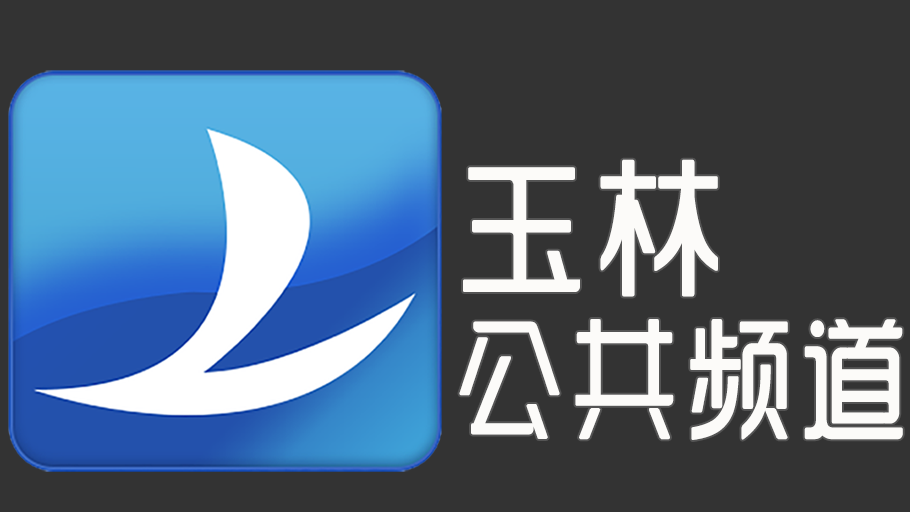
<style>
.page{position:relative;width:910px;height:512px;background:#333333}
.page>*{position:absolute;margin:0}
.t1{font:132px/160px "SJyunlvyuan";letter-spacing:0.02em;color:#fcfbf9;scale:0.85 1}
.t2{font:150px/160px "SJyunlvyuan";letter-spacing:0.02em;color:#fcfbf9;scale:0.9 1}
</style>
<div class="page">
<p class="t1" style="left:459px;top:159px;width:444px;height:281px"><span class="t2">玉林<br></span>公共频道</p>
</div>
